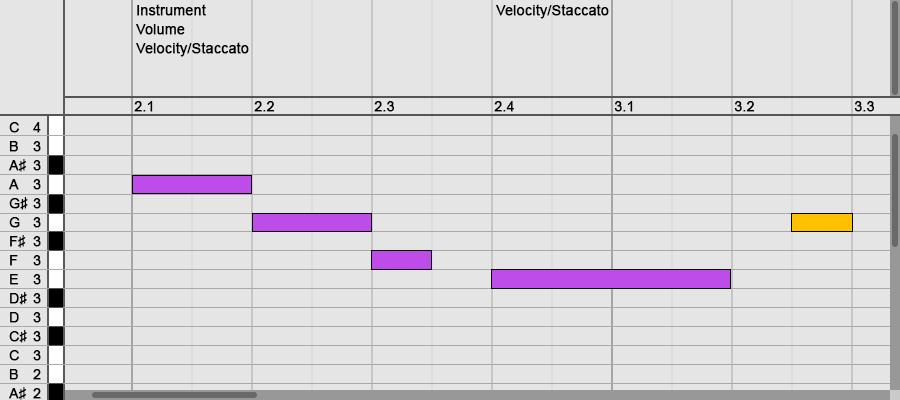
<style>
.page{position:relative;width:900px;height:400px;background:#e5e5e5}
.page>*{position:absolute;margin:0}
.t1{font:14px/19px "ArialMT";color:#000000;font-weight:bold}
.t2{font:14px "ArialMT";color:#000000;font-weight:bold}
</style>
<div class="page">
<p class="t1" style="left:136px;top:4px;width:113px;height:53px">Instrument<br>Volume<br>Velocity/Staccato</p>
<p class="t2" style="left:496px;top:4px;width:113px;height:15px">Velocity/Staccato</p>
<p class="t2" style="left:134px;top:101px;width:19px;height:11px">2.1</p>
<p class="t2" style="left:254px;top:101px;width:21px;height:11px">2.2</p>
<p class="t2" style="left:374px;top:101px;width:21px;height:11px">2.3</p>
<p class="t2" style="left:494px;top:101px;width:20px;height:11px">2.4</p>
<p class="t2" style="left:614px;top:101px;width:19px;height:11px">3.1</p>
<p class="t2" style="left:734px;top:101px;width:21px;height:11px">3.2</p>
<p class="t2" style="left:854px;top:101px;width:21px;height:11px">3.3</p>
<p class="t1" style="left:9px;top:122px;width:19px;height:278px">C<br>B<br>A♯<br>A<br>G♯<br>G<br>F♯<br>F<br>E<br>D♯<br>D<br>C♯<br>C<br>B<br>A♯</p>
<p class="t1" style="left:33px;top:122px;width:8px;height:277px">4<br>3<br>3<br>3<br>3<br>3<br>3<br>3<br>3<br>3<br>3<br>3<br>3<br>2<br>2</p>
</div>
